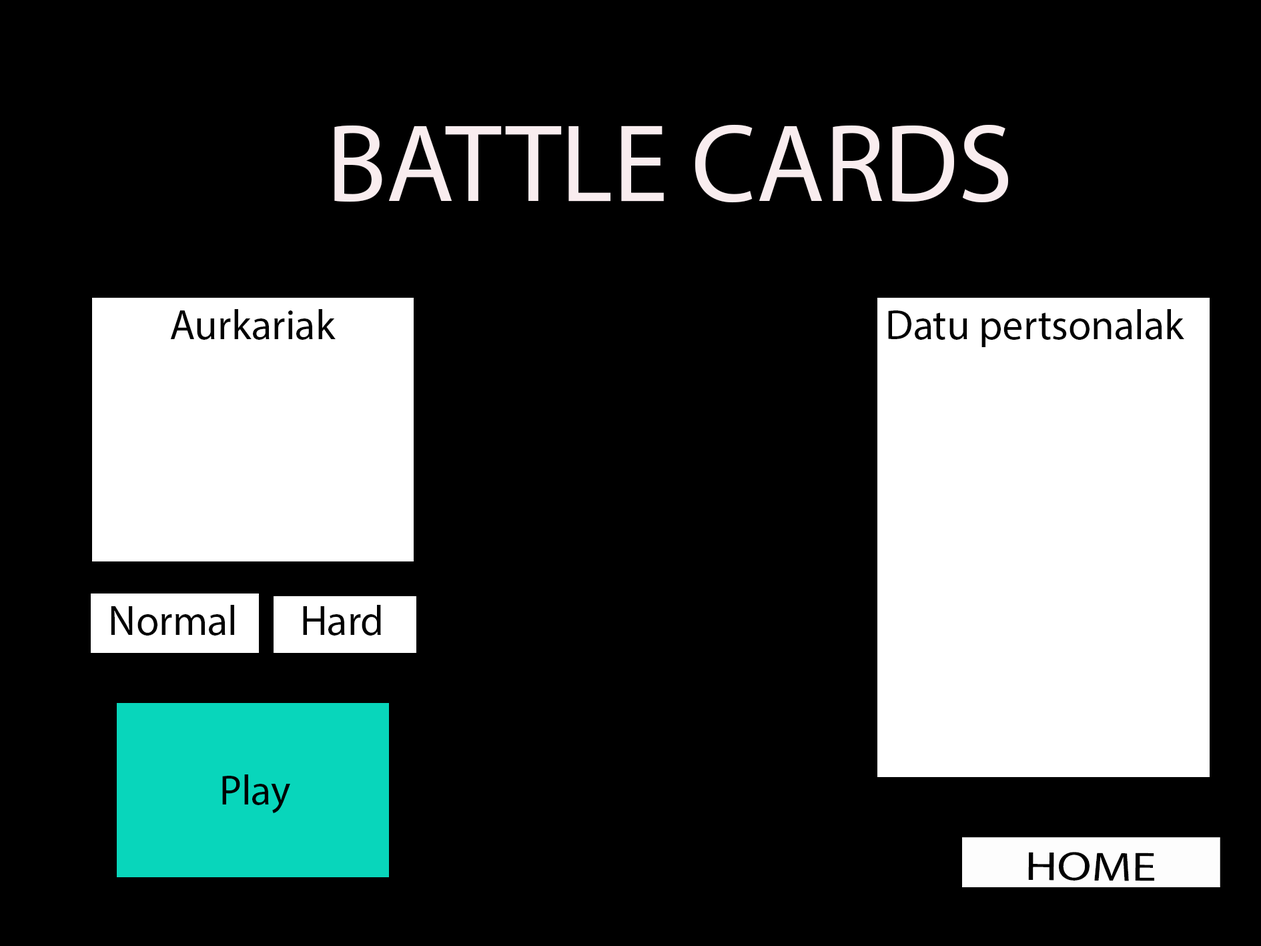
<style>
.page{position:relative;width:1261px;height:946px;background:#000000}
.page>*{position:absolute;margin:0}
.t1{font:111.2px "MyriadPro-Regular";color:#f9edef}
.t2{font:41.7px "MyriadPro-Regular";color:#000000}
.t3{font:41px "MyriadPro-Regular";color:#000000;scale:1.22 1}
</style>
<div class="page">
<p class="t1" style="left:334px;top:124px;width:674px;height:79px">BATTLE CARDS</p>
<p class="t2" style="left:170px;top:309px;width:166px;height:31px">Aurkariak</p>
<p class="t2" style="left:888px;top:309px;width:296px;height:38px">Datu pertsonalak</p>
<p class="t2" style="left:111px;top:605px;width:123px;height:30px">Normal</p>
<p class="t2" style="left:303px;top:605px;width:78px;height:30px">Hard</p>
<p class="t2" style="left:222px;top:774px;width:68px;height:39px">Play</p>
<p class="t3" style="left:1028px;top:851px;width:126px;height:30px;rotate:1deg">HOME</p>
</div>
